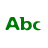
<style>
.page{position:relative;width:48px;height:48px;background:#ffffff}
.page>*{position:absolute;margin:0}
.t1{font:18px "Flexure";color:#007806}
</style>
<div class="page">
<p class="t1" style="left:5px;top:17px;width:36px;height:14px">Abc</p>
</div>
